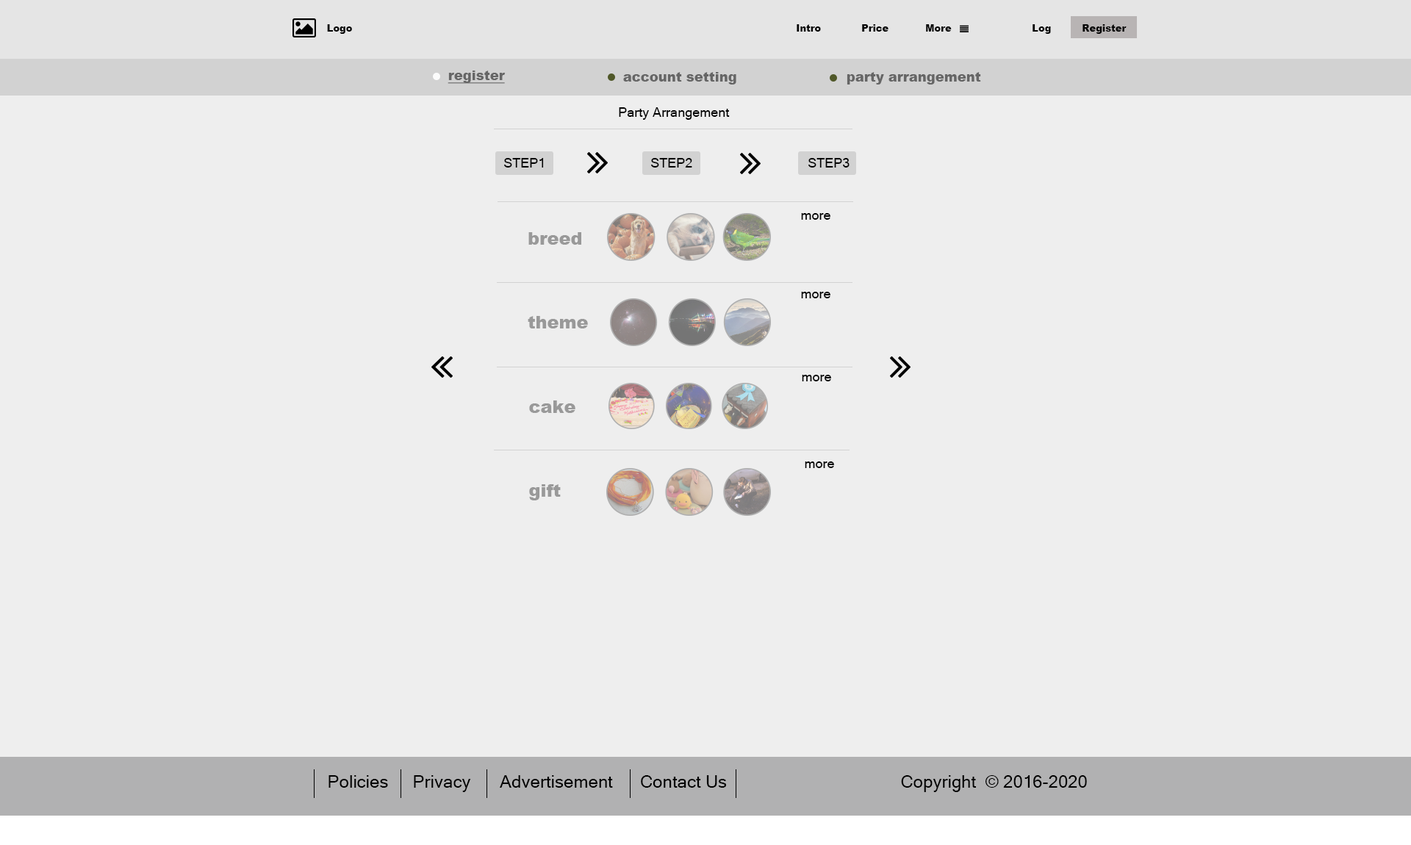
<style>
.page{position:relative;width:1411px;height:845px;background:#eeeeee}
.page>*{position:absolute;margin:0}
.t1{font:9.6px "Arial-Black";color:#050505}
.t2{font:13.2px "Arial-Black";color:#666666;text-decoration:underline}
.t3{font:13.2px "Arial-Black";color:#666666}
.t4{font:13.2px "MicrosoftSansSerif";color:#000000}
.t5{font:17.6px "Arial-Black";color:#999999}
.t6{font:17.6px "MicrosoftSansSerif";color:#000000}
</style>
<div class="page">
<p class="t1" style="left:327px;top:24px;width:25px;height:10px">Logo</p>
<p class="t1" style="left:797px;top:24px;width:24px;height:8px">Intro</p>
<p class="t1" style="left:862px;top:24px;width:26px;height:8px">Price</p>
<p class="t1" style="left:926px;top:24px;width:26px;height:8px">More</p>
<p class="t1" style="left:1033px;top:24px;width:18px;height:10px">Log</p>
<p class="t1" style="left:1082px;top:24px;width:45px;height:10px">Register</p>
<p class="t2" style="left:448px;top:71px;width:58px;height:13px">register</p>
<p class="t3" style="left:623px;top:72px;width:113px;height:13px">account setting</p>
<p class="t3" style="left:847px;top:72px;width:134px;height:13px">party arrangement</p>
<p class="t4" style="left:619px;top:107px;width:111px;height:13px">Party Arrangement</p>
<p class="t4" style="left:504px;top:158px;width:40px;height:10px">STEP1</p>
<p class="t4" style="left:651px;top:158px;width:41px;height:10px">STEP2</p>
<p class="t4" style="left:808px;top:158px;width:42px;height:10px">STEP3</p>
<p class="t4" style="left:801px;top:213px;width:29px;height:7px">more</p>
<p class="t5" style="left:528px;top:232px;width:53px;height:13px">breed</p>
<p class="t4" style="left:801px;top:292px;width:29px;height:6px">more</p>
<p class="t5" style="left:528px;top:316px;width:60px;height:12px">theme</p>
<p class="t4" style="left:802px;top:375px;width:29px;height:6px">more</p>
<p class="t5" style="left:529px;top:401px;width:46px;height:12px">cake</p>
<p class="t4" style="left:805px;top:462px;width:29px;height:6px">more</p>
<p class="t5" style="left:529px;top:484px;width:32px;height:16px">gift</p>
<p class="t6" style="left:328px;top:775px;width:60px;height:13px">Policies</p>
<p class="t6" style="left:414px;top:775px;width:57px;height:17px">Privacy</p>
<p class="t6" style="left:500px;top:775px;width:113px;height:13px">Advertisement</p>
<p class="t6" style="left:641px;top:775px;width:86px;height:13px">Contact Us</p>
<p class="t6" style="left:901px;top:775px;width:186px;height:17px">Copyright  © 2016-2020</p>
</div>
